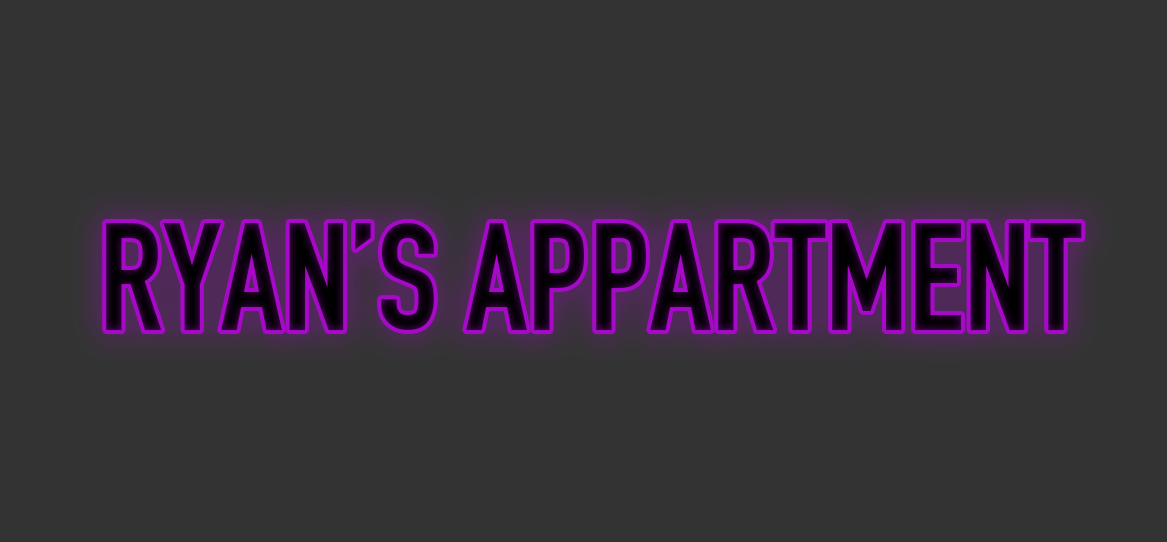
<style>
.page{position:relative;width:1167px;height:542px;background:#333333}
.page>*{position:absolute;margin:0}
.t1{font:150.4px "DINEngschrift";color:#100114}
</style>
<div class="page">
<p class="t1" style="left:106px;top:222px;width:976px;height:109px">RYAN’S APPARTMENT</p>
</div>
